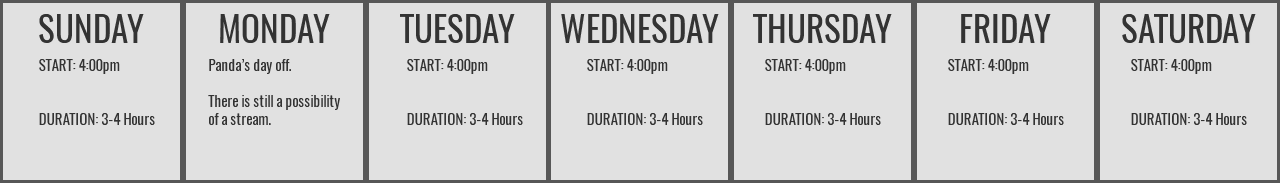
<style>
.page{position:relative;width:1280px;height:183px;background:#e1e1e1}
.page>*{position:absolute;margin:0}
.t1{font:35px "Oswald-Regular";color:#333333}
.t2{font:15px "Oswald-Regular";color:#333333}
</style>
<div class="page">
<p class="t1" style="left:39px;top:14px;width:105px;height:29px">SUNDAY</p>
<p class="t1" style="left:220px;top:14px;width:110px;height:29px">MONDAY</p>
<p class="t1" style="left:400px;top:14px;width:115px;height:29px">TUESDAY</p>
<p class="t1" style="left:561px;top:14px;width:158px;height:29px">WEDNESDAY</p>
<p class="t1" style="left:753px;top:14px;width:139px;height:29px">THURSDAY</p>
<p class="t1" style="left:961px;top:14px;width:90px;height:29px">FRIDAY</p>
<p class="t1" style="left:1122px;top:14px;width:134px;height:29px">SATURDAY</p>
<p class="t2" style="left:39px;top:59px;width:116px;height:66px">START: 4:00pm<br><br><br>DURATION: 3-4 Hours</p>
<p class="t2" style="left:208px;top:59px;width:132px;height:66px">Panda’s day off.<br><br>There is still a possibility<br>of a stream.</p>
<p class="t2" style="left:407px;top:59px;width:116px;height:66px">START: 4:00pm<br><br><br>DURATION: 3-4 Hours</p>
<p class="t2" style="left:587px;top:59px;width:116px;height:66px">START: 4:00pm<br><br><br>DURATION: 3-4 Hours</p>
<p class="t2" style="left:765px;top:59px;width:116px;height:66px">START: 4:00pm<br><br><br>DURATION: 3-4 Hours</p>
<p class="t2" style="left:948px;top:59px;width:116px;height:66px">START: 4:00pm<br><br><br>DURATION: 3-4 Hours</p>
<p class="t2" style="left:1131px;top:59px;width:116px;height:66px">START: 4:00pm<br><br><br>DURATION: 3-4 Hours</p>
</div>
